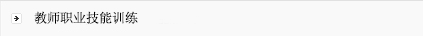
<style>
.page{position:relative;width:423px;height:36px;background:#f9f9f9}
.page>*{position:absolute;margin:0}
.t1{font:13px "SimSun";color:#000000}
</style>
<div class="page">
<p class="t1" style="left:34px;top:11px;width:104px;height:13px">教师职业技能训练</p>
</div>
